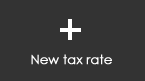
<style>
.page{position:relative;width:145px;height:81px;background:#333333}
.page>*{position:absolute;margin:0}
.t1{font:12.9px "CenturyGothic";color:#ffffff;font-weight:bold}
</style>
<div class="page">
<p class="t1" style="left:31px;top:54px;width:81px;height:11px">New tax rate</p>
</div>
